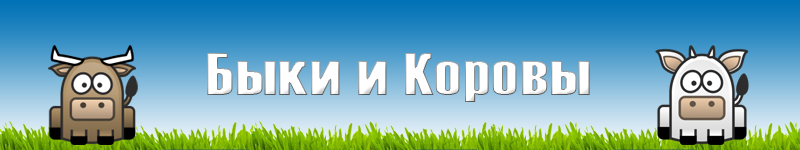
<style>
.page{position:relative;width:800px;height:150px}
.page>*{position:absolute;margin:0}
.t1{font:60px "Haettenschweiler";letter-spacing:0.025em;color:#ffffff;scale:1.2 1}
</style>
<div class="page">
<p class="t1" style="left:207px;top:53px;width:383px;height:49px">Быки и Коровы</p>
</div>
